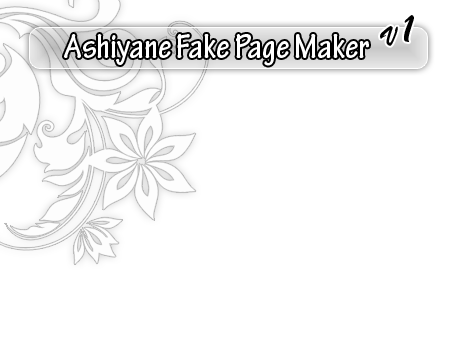
<style>
.page{position:relative;width:450px;height:350px;background:#ffffff}
.page>*{position:absolute;margin:0}
.t1{font:26.5px "BrushScriptStd";color:#000000}
.t2{font:37.9px "BrushScriptStd";color:#000000}
.t3{font:36.3px "TektonPro-BoldCond";color:#ffffff}
</style>
<div class="page">
<p class="t1" style="left:380px;top:15px;width:34px;height:31px;rotate:-13deg">V<span class="t2">1</span></p>
<p class="t3" style="left:64px;top:34px;width:305px;height:32px">Ashiyane Fake Page Maker</p>
</div>
